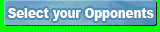
<style>
.page{position:relative;width:160px;height:32px;background:#00ff00}
.page>*{position:absolute;margin:0}
.t1{font:14px "Arial-Black";color:#ffffff;scale:0.84 1}
</style>
<div class="page">
<p class="t1" style="left:8px;top:8px;width:146px;height:13px">Select your Opponents</p>
</div>
